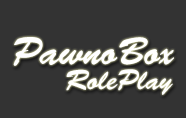
<style>
.page{position:relative;width:186px;height:118px;background:#333333}
.page>*{position:absolute;margin:0}
.t1{font:38.7px "BrushScriptStd";color:#ffffff}
.t2{font:28px "BrushScriptStd";color:#ffffff}
</style>
<div class="page">
<p class="t1" style="left:13px;top:37px;width:161px;height:29px">PawnoBox</p>
<p class="t2" style="left:66px;top:69px;width:107px;height:26px">RolePlay</p>
</div>
